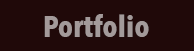
<style>
.page{position:relative;width:194px;height:51px;background:#200909}
.page>*{position:absolute;margin:0}
.t1{font:30.4px "AvenirNextCondensed-Bold";color:#a39a9a}
</style>
<div class="page">
<p class="t1" style="left:44px;top:14px;width:105px;height:23px">Portfolio</p>
</div>
